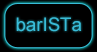
<style>
.page{position:relative;width:97px;height:52px;background:#000000}
.page>*{position:absolute;margin:0}
.t1{font:18.7px "ArialMT";color:#39bcd8}
</style>
<div class="page">
<p class="t1" style="left:16px;top:17px;width:66px;height:15px">barISTa</p>
</div>
